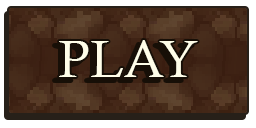
<style>
.page{position:relative;width:256px;height:128px}
.page>*{position:absolute;margin:0}
.t1{font:51.8px "CalistoMT";color:#fffee9}
</style>
<div class="page">
<p class="t1" style="left:59px;top:40px;width:139px;height:37px">PLAY</p>
</div>
